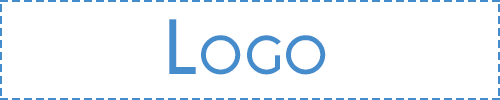
<style>
.page{position:relative;width:500px;height:100px;background:#ffffff}
.page>*{position:absolute;margin:0}
.t1{font:70px "CaviarDreams-Bold";color:#448ccb;font-variant:small-caps}
</style>
<div class="page">
<p class="t1" style="left:169px;top:19px;width:157px;height:56px">Logo</p>
</div>
